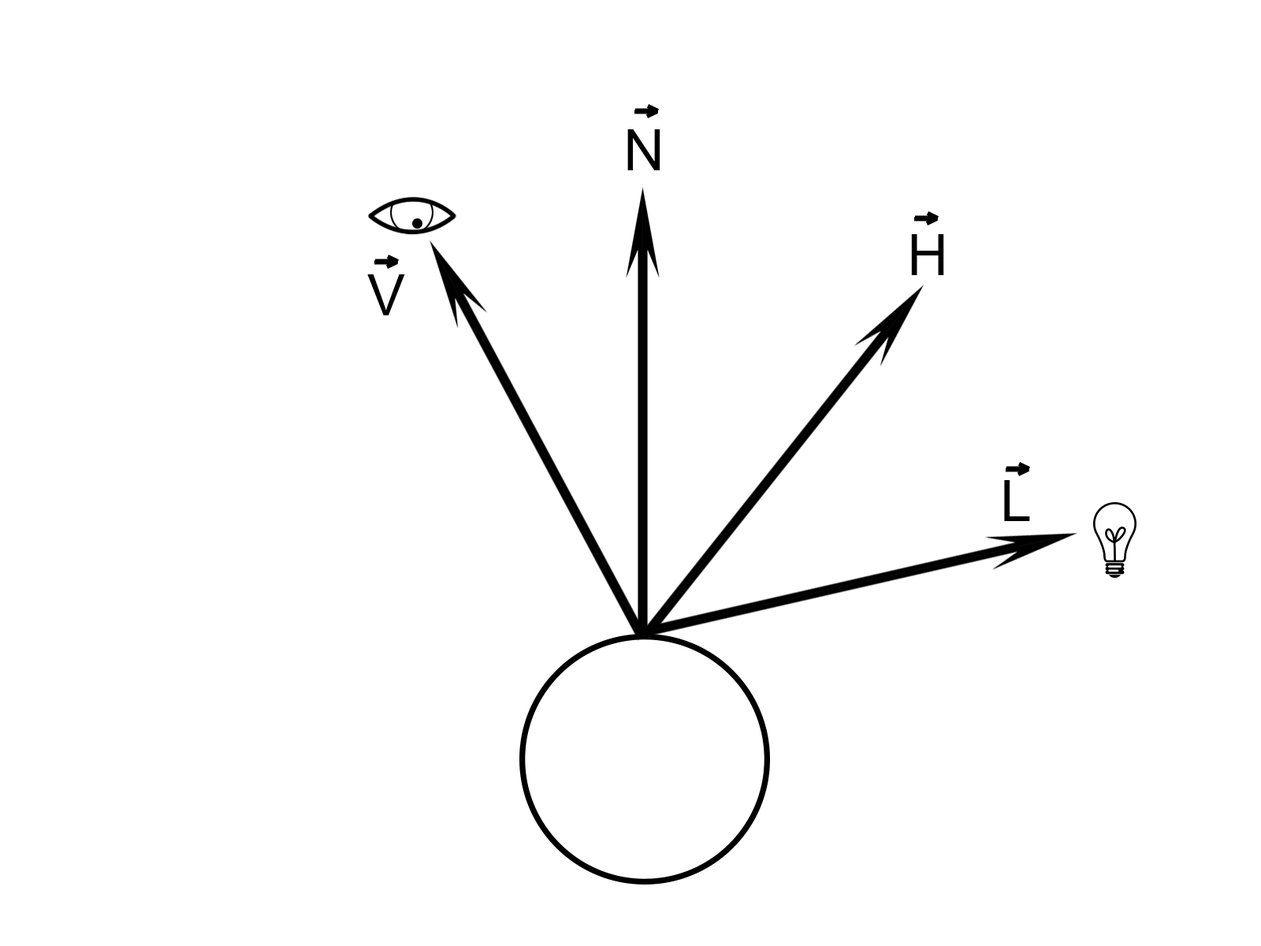
<style>
.page{position:relative;width:1261px;height:946px;background:#ffffff}
.page>*{position:absolute;margin:0}
.t1{font:56.7px "ArialMT";color:#000000}
</style>
<div class="page">
<p class="t1" style="left:627px;top:129px;width:33px;height:41px">N</p>
<p class="t1" style="left:911px;top:234px;width:33px;height:41px">H</p>
<p class="t1" style="left:367px;top:274px;width:38px;height:41px">V</p>
<p class="t1" style="left:1004px;top:480px;width:26px;height:41px">L</p>
</div>
